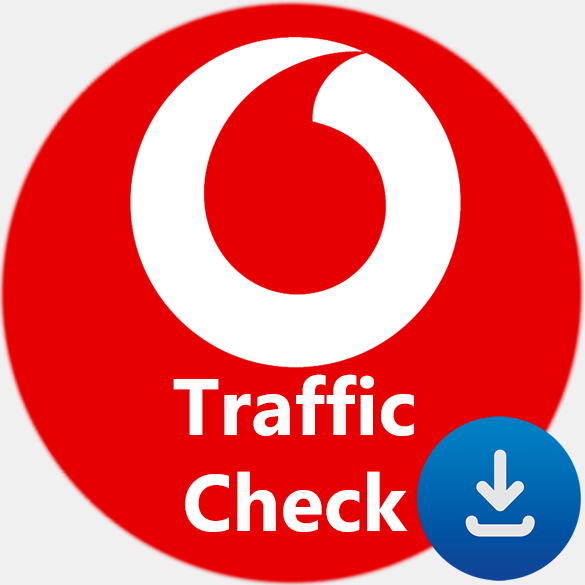
<style>
.page{position:relative;width:585px;height:585px;background:#e60002}
.page>*{position:absolute;margin:0}
.t1{font:80px "MicrosoftTaiLe-Bold";color:#ffffff}
</style>
<div class="page">
<p class="t1" style="left:173px;top:374px;width:241px;height:158px;text-align:center">Traffic<br>Check</p>
</div>
